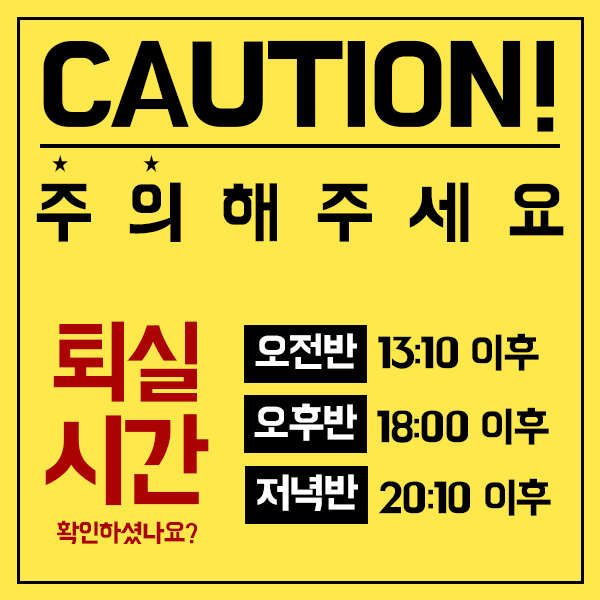
<style>
.page{position:relative;width:600px;height:600px;background:#ffe84c}
.page>*{position:absolute;margin:0}
.t1{font:118.1px "BMHANNAPro";letter-spacing:-0.025em;color:#000000}
.t2{font:20.4px "NanumBarunGothic";letter-spacing:0.435em;color:#000000;scale:0.85 1}
.t3{font:70.4px "BMHANNAPro";letter-spacing:0.475em;color:#000000}
.t4{font:26.8px "BMHANNAPro";letter-spacing:-0.05em;color:#ab0101}
.t5{font:95.6px "BMHANNAPro";letter-spacing:-0.05em;color:#ab0101}
.t6{font:108.4px/102px "BMHANNAPro";letter-spacing:-0.05em;color:#ab0101}
.t7{font:43.2px "BMHANNAPro";letter-spacing:-0.05em;color:#ffffff}
.t8{font:43.3px "BMHANNAPro";letter-spacing:-0.05em;color:#000000}
</style>
<div class="page">
<p class="t1" style="left:43px;top:40px;width:511px;height:92px">CAUTION!</p>
<p class="t2" style="left:52px;top:155px;width:108px;height:17px">★      ★</p>
<p class="t3" style="left:36px;top:182px;width:528px;height:60px">주의해주세요</p>
<p class="t4" style="left:45px;top:321px;width:164px;height:223px;text-align:center"><span class="t5">퇴실<br></span><span class="t6">시간<br></span>확인하셨나요?</p>
<p class="t7" style="left:255px;top:333px;width:102px;height:36px">오전반</p>
<p class="t8" style="left:378px;top:333px;width:161px;height:38px">13:10 이후</p>
<p class="t7" style="left:254px;top:403px;width:103px;height:38px">오후반</p>
<p class="t8" style="left:377px;top:407px;width:172px;height:38px">18:00 이후</p>
<p class="t7" style="left:257px;top:474px;width:101px;height:37px">저녁반</p>
<p class="t8" style="left:378px;top:478px;width:173px;height:38px">20:10 이후</p>
</div>
